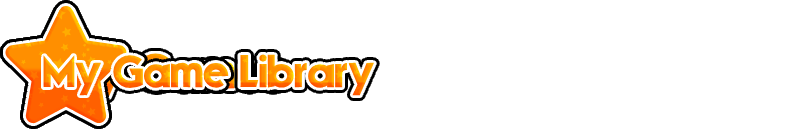
<style>
.page{position:relative;width:803px;height:132px;background:#ffffff}
.page>*{position:absolute;margin:0}
.t1{font:45px "Mouser"}
</style>
<div class="page">
<p class="t1" style="left:43px;top:54px;width:331px;height:42px">My Game Library</p>
</div>
